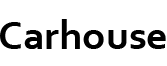
<style>
.page{position:relative;width:167px;height:66px;background:#ffffff}
.page>*{position:absolute;margin:0}
.t1{font:42px "Corbel-Bold";color:#000000}
</style>
<div class="page">
<p class="t1" style="left:0px;top:19px;width:166px;height:30px">Carhouse</p>
</div>
